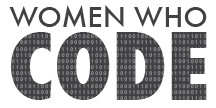
<style>
.page{position:relative;width:216px;height:108px;background:#ffffff}
.page>*{position:absolute;margin:0}
.t1{font:27px "Futura-Medium";color:#414042}
.t2{font:90.5px "Futura-CondensedExtraBold";color:#414042}
</style>
<div class="page">
<p class="t1" style="left:9px;top:5px;width:198px;height:22px">WOMEN WHO</p>
<p class="t2" style="left:11px;top:32px;width:196px;height:68px">CODE</p>
</div>
